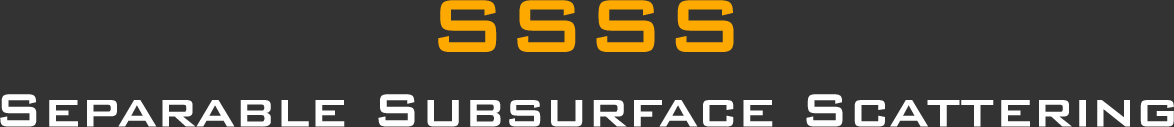
<style>
.page{position:relative;width:1174px;height:127px;background:#333333}
.page>*{position:absolute;margin:0}
.t1{font:62px "BankGothicBT-Medium";color:#fefefe}
.t2{font:100px "BankGothicBT-Medium";color:#fea900}
</style>
<div class="page">
<p class="t1" style="left:0px;top:0px;width:1174px;height:127px;text-align:center"><span class="t2">SSSS<br></span>Separable Subsurface Scattering</p>
</div>
